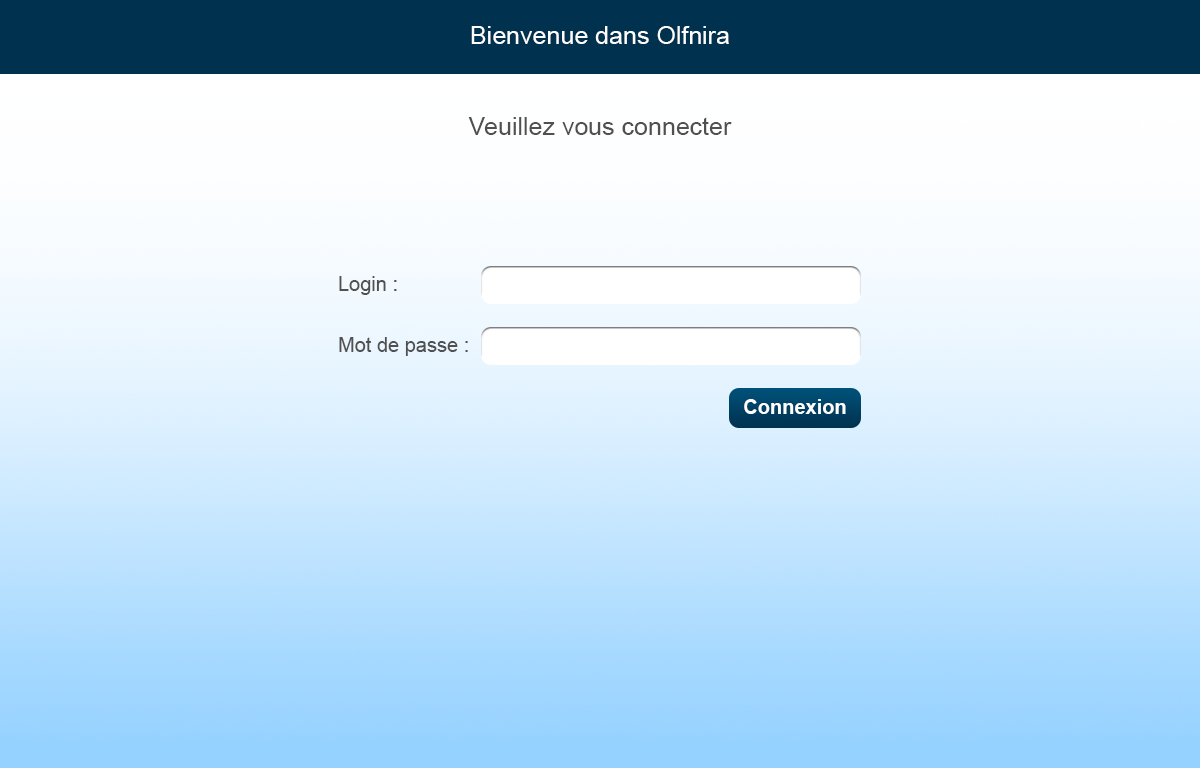
<style>
.page{position:relative;width:1200px;height:768px}
.page>*{position:absolute;margin:0}
.t1{font:25px "ArialMT";color:#fffefe}
.t2{font:25px "ArialMT";color:#505050}
.t3{font:20px "ArialMT";color:#505050}
.t4{font:20px "Arial-BoldMT";color:#ffffff}
</style>
<div class="page">
<p class="t1" style="left:471px;top:26px;width:258px;height:18px">Bienvenue dans Olfnira</p>
<p class="t2" style="left:468px;top:117px;width:264px;height:18px">Veuillez vous connecter</p>
<p class="t3" style="left:339px;top:276px;width:58px;height:19px">Login :</p>
<p class="t3" style="left:339px;top:337px;width:129px;height:19px">Mot de passe :</p>
<p class="t4" style="left:744px;top:399px;width:102px;height:15px">Connexion</p>
</div>
